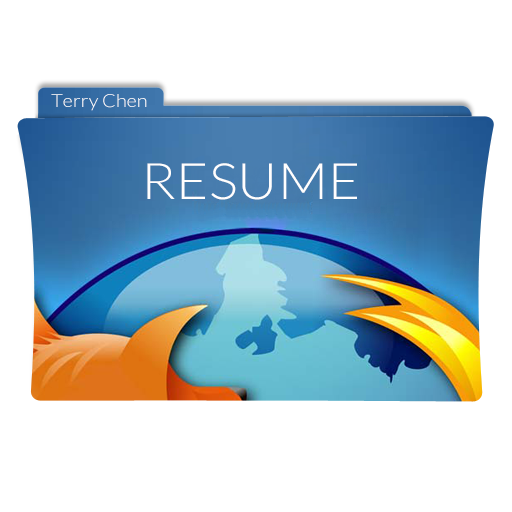
<style>
.page{position:relative;width:512px;height:512px;background:#ffffff}
.page>*{position:absolute;margin:0}
.t1{font:18px "Lato-Light";color:#fffefe;scale:1.1 1}
.t2{font:50px "Lato-Light";color:#fffefe;scale:1.1 1}
</style>
<div class="page">
<p class="t1" style="left:51px;top:94px;width:96px;height:17px">Terry Chen</p>
<p class="t2" style="left:147px;top:163px;width:210px;height:37px">RESUME</p>
</div>
